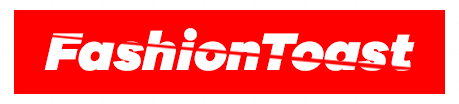
<style>
.page{position:relative;width:459px;height:104px;background:#ff0000}
.page>*{position:absolute;margin:0}
.t1{font:54.4px "GalanoGrotesque-BlackItalic";color:#ffffff}
</style>
<div class="page">
<p class="t1" style="left:44px;top:28px;width:371px;height:43px">FashionToast</p>
</div>
